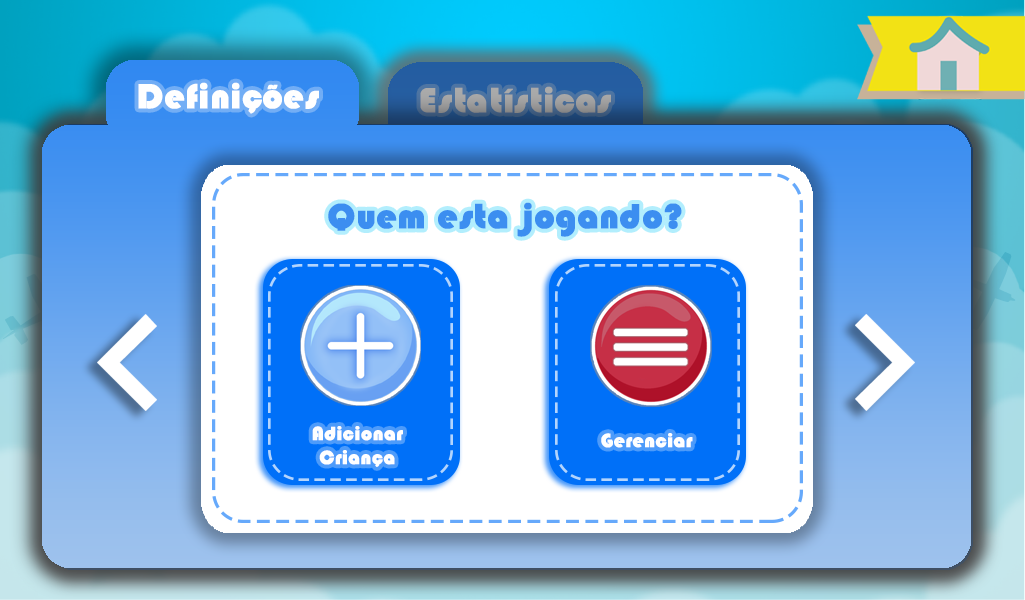
<style>
.page{position:relative;width:1025px;height:600px}
.page>*{position:absolute;margin:0}
.t1{font:36px "Blippo-Heavy";color:#ffffff;font-weight:bold}
.t2{font:36px "Blippo-Heavy";color:#3c8ef0;font-weight:bold}
.t3{font:20px "Blippo-Heavy";color:#ffffff;font-weight:bold}
</style>
<div class="page">
<p class="t1" style="left:138px;top:82px;width:181px;height:32px">Definições</p>
<p class="t2" style="left:328px;top:202px;width:354px;height:35px">Quem esta jogando?</p>
<p class="t3" style="left:312px;top:426px;width:91px;height:41px;text-align:center">Adicionar <br>Criança</p>
<p class="t3" style="left:601px;top:433px;width:92px;height:15px">Gerenciar</p>
</div>
